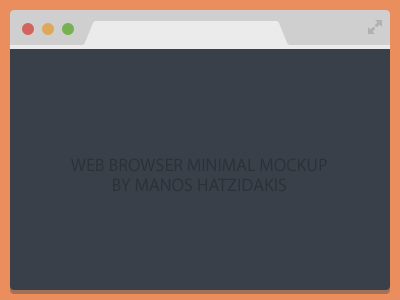
<style>
.page{position:relative;width:400px;height:300px;background:#3a404a}
.page>*{position:absolute;margin:0}
.t1{font:18px/20px "MyriadPro-Regular";color:#2d3138;text-transform:uppercase}
</style>
<div class="page">
<p class="t1" style="left:71px;top:158px;width:256px;height:34px;text-align:center">Web Browser minimal mockup<br>By Manos Hatzidakis</p>
</div>
